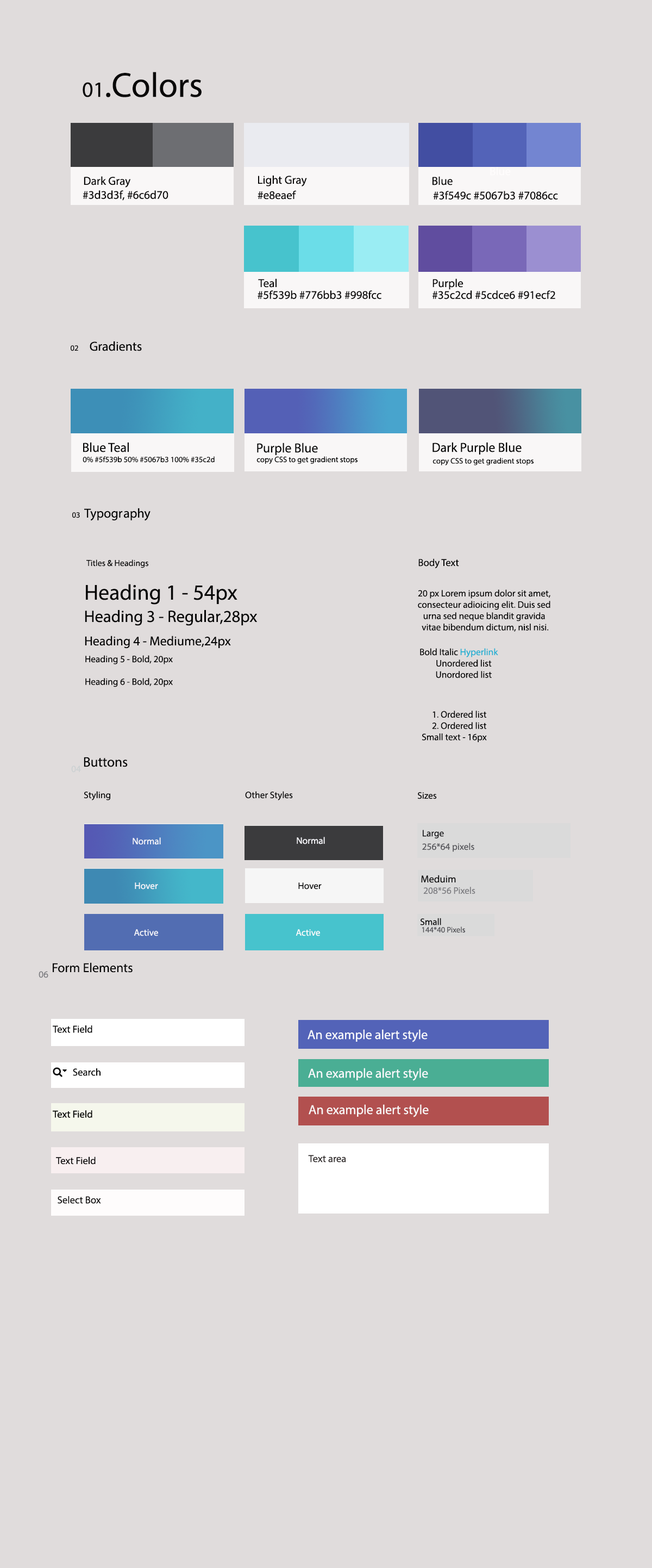
<style>
.page{position:relative;width:652px;height:1568px;background:#e0dcdc}
.page>*{position:absolute;margin:0}
.t1{font:34.8px "MyriadPro-Regular";color:#090808}
.t2{font:21.7px "MyriadPro-Regular";color:#090808}
.t3{font:11.6px "MyriadPro-Regular";color:#fefcfc}
.t4{font:11.6px "MyriadPro-Regular";color:#090808}
.t5{font:13px "MyriadPro-Regular";color:#060606}
.t6{font:8px "MyriadPro-Regular";color:#060606}
.t7{font:8.7px "MyriadPro-Regular";color:#060606}
.t8{font:10.1px "MyriadPro-Regular";color:#060606}
.t9{font:21.7px "MyriadPro-Regular";color:#060606}
.t10{font:9.4px "MyriadPro-Regular";color:#060606}
.t11{font:16.7px "MyriadPro-Regular";color:#060606}
.t12{font:9.4px "MyriadPro-Regular";color:#21b0d2}
.t13{font:13.8px "MyriadPro-Regular";color:#070707}
.t14{font:9.4px "MyriadPro-Regular";color:#ccd1d2}
.t15{font:9.4px "MyriadPro-Regular";color:#070707}
.t16{font:9.4px "MyriadPro-Regular";color:#121215}
.t17{font:9.4px "MyriadPro-Regular";color:#f6f6fa}
.t18{font:9.4px "MyriadPro-Regular";color:#57575c}
.t19{font:10.1px "MyriadPro-Regular";color:#0e0e0f}
.t20{font:9.4px "MyriadPro-Regular";color:#0c0c0d}
.t21{font:9.4px "MyriadPro-Regular";color:#7e7e82}
.t22{font:9.4px "MyriadPro-Regular";color:#0a0a0b}
.t23{font:9.4px "MyriadPro-Regular";color:#fbfbfc}
.t24{font:8px "MyriadPro-Regular";color:#535358}
.t25{font:13px "MyriadPro-Regular";color:#070707}
.t26{font:10.1px "MyriadPro-Regular";color:#070707}
.t27{font:13px "MyriadPro-Regular";color:#f7f8fb}
.t28{font:13px "MyriadPro-Regular";color:#f9f6f6}
.t29{font:10.1px "MyriadPro-Regular";color:#0c0b0b}
.t30{font:10.1px "MyriadPro-Regular";color:#292323}
.t31{font:10.1px "MyriadPro-Regular";color:#0b0a0a}
</style>
<div class="page">
<p class="t1" style="left:83px;top:72px;width:119px;height:25px"><span class="t2">01</span>.Colors</p>
<p class="t3" style="left:490px;top:167px;width:21px;height:9px">Blue</p>
<p class="t4" style="left:84px;top:176px;width:47px;height:12px">Dark Gray</p>
<p class="t4" style="left:258px;top:175px;width:49px;height:11px">Light Gray</p>
<p class="t4" style="left:433px;top:176px;width:20px;height:9px">Blue</p>
<p class="t4" style="left:83px;top:190px;width:86px;height:11px">#3d3d3f, #6c6d70</p>
<p class="t4" style="left:258px;top:190px;width:38px;height:10px">#e8eaef</p>
<p class="t4" style="left:433px;top:191px;width:125px;height:9px">#3f549c #5067b3 #7086cc</p>
<p class="t4" style="left:258px;top:278px;width:19px;height:10px">Teal</p>
<p class="t4" style="left:433px;top:278px;width:31px;height:12px">Purple</p>
<p class="t4" style="left:258px;top:290px;width:124px;height:9px">#5f539b #776bb3 #998fcc</p>
<p class="t4" style="left:433px;top:290px;width:123px;height:9px">#35c2cd #5cdce6 #91ecf2</p>
<p class="t5" style="left:90px;top:341px;width:52px;height:10px">Gradients</p>
<p class="t6" style="left:71px;top:345px;width:7px;height:6px">02</p>
<p class="t5" style="left:83px;top:442px;width:46px;height:10px">Blue Teal</p>
<p class="t5" style="left:257px;top:443px;width:61px;height:12px">Purple Blue</p>
<p class="t5" style="left:433px;top:442px;width:89px;height:13px">Dark Purple Blue</p>
<p class="t6" style="left:83px;top:456px;width:132px;height:7px">0% #5f539b 50% #5067b3 100% #35c2d</p>
<p class="t6" style="left:257px;top:456px;width:101px;height:8px">copy CSS to get gradient stops</p>
<p class="t6" style="left:433px;top:458px;width:101px;height:7px"><span class="t5"><br></span>copy CSS to get gradient stops</p>
<p class="t5" style="left:84px;top:508px;width:67px;height:13px">Typogr aphy</p>
<p class="t6" style="left:72px;top:512px;width:8px;height:6px">03</p>
<p class="t7" style="left:86px;top:559px;width:62px;height:9px">Titles &amp; Headings</p>
<p class="t8" style="left:419px;top:558px;width:40px;height:11px">Body Text</p>
<p class="t9" style="left:86px;top:584px;width:152px;height:21px"><span class="t8"><br></span>Heading 1 - 54px</p>
<p class="t10" style="left:418px;top:589px;width:133px;height:43px;text-align:center">20 px Lorem ipsum dolor sit amet, <br>consecteur adioicing elit. Duis sed <br>urna sed neque blandit gravida <br>vitae bibendum dictum, nisl nisi.</p>
<p class="t11" style="left:85px;top:610px;width:173px;height:16px">Heading 3 - Regular,28px</p>
<p class="t5" style="left:85px;top:636px;width:146px;height:13px">Heading 4 - Mediume,24px</p>
<p class="t10" style="left:420px;top:648px;width:79px;height:30px;text-align:center">Bold Italic <span class="t12">Hyperlink</span> <br>     Unordered list <br>     Unordored list</p>
<p class="t10" style="left:85px;top:655px;width:88px;height:32px;text-align:center">Heading 5 - Bold, 20px<br><br>Heading 6 - Bold, 20px</p>
<p class="t10" style="left:422px;top:711px;width:65px;height:31px;text-align:center">1. Ordered list<br>     2. Ordered list<br>Small text - 16px</p>
<p class="t13" style="left:84px;top:757px;width:44px;height:10px">Buttons</p>
<p class="t14" style="left:71px;top:766px;width:10px;height:7px">04</p>
<p class="t15" style="left:84px;top:791px;width:26px;height:9px">Styling</p>
<p class="t15" style="left:245px;top:791px;width:48px;height:9px">Other Styles</p>
<p class="t15" style="left:418px;top:792px;width:19px;height:7px">Sizes</p>
<p class="t16" style="left:423px;top:830px;width:21px;height:8px">Large</p>
<p class="t17" style="left:133px;top:837px;width:28px;height:8px">Normal</p>
<p class="t17" style="left:297px;top:837px;width:28px;height:7px">Normal</p>
<p class="t18" style="left:422px;top:843px;width:53px;height:9px">256*64 pixels</p>
<p class="t19" style="left:421px;top:875px;width:35px;height:8px">Meduim</p>
<p class="t17" style="left:135px;top:882px;width:23px;height:7px">Hover</p>
<p class="t20" style="left:298px;top:882px;width:24px;height:7px">Hover</p>
<p class="t21" style="left:424px;top:887px;width:52px;height:7px"><span class="t19"><br></span>208*56 Pixels</p>
<p class="t22" style="left:420px;top:918px;width:21px;height:7px">Small</p>
<p class="t17" style="left:134px;top:929px;width:24px;height:7px">Active</p>
<p class="t23" style="left:296px;top:929px;width:24px;height:7px">Active</p>
<p class="t24" style="left:422px;top:926px;width:43px;height:7px">144*40 Pixels</p>
<p class="t25" style="left:53px;top:962px;width:80px;height:11px">Form Elements</p>
<p class="t21" style="left:39px;top:971px;width:9px;height:7px">06</p>
<p class="t26" style="left:53px;top:1025px;width:39px;height:8px">Text Field</p>
<p class="t27" style="left:308px;top:1029px;width:120px;height:13px">An example alert style</p>
<p class="t26" style="left:73px;top:1068px;width:28px;height:8px">Search</p>
<p class="t27" style="left:308px;top:1068px;width:120px;height:13px">An example alert style</p>
<p class="t28" style="left:309px;top:1104px;width:120px;height:13px">An example alert style</p>
<p class="t29" style="left:56px;top:1156px;width:40px;height:9px">Text Field</p>
<p class="t30" style="left:308px;top:1155px;width:38px;height:7px">Text area</p>
<p class="t31" style="left:58px;top:1196px;width:43px;height:8px">Select Box</p>
</div>
